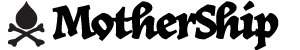
<style>
.page{position:relative;width:300px;height:50px;background:#ffffff}
.page>*{position:absolute;margin:0}
.t1{font:46.1px "Herb";color:#000000}
</style>
<div class="page">
<p class="t1" style="left:52px;top:0px;width:227px;height:51px">MotherShip</p>
</div>
